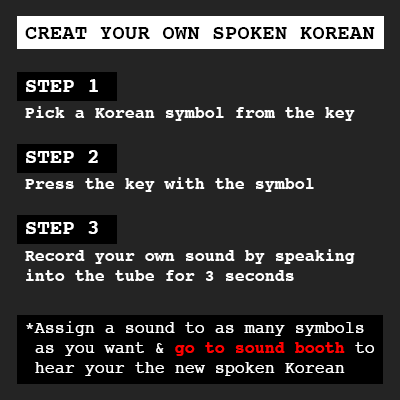
<style>
.page{position:relative;width:400px;height:400px;background:#242424}
.page>*{position:absolute;margin:0}
.t1{font:20.8px "Courier-Bold";color:#000000}
.t2{font:16.7px "Courier-Bold";color:#ffffff}
.t3{font:20.8px "Courier-Bold";color:#ffffff}
.t4{font:16.7px "Courier";color:#ffffff}
.t5{font:16.7px "Courier-Bold";color:#ff0000}
</style>
<div class="page">
<p class="t1" style="left:25px;top:27px;width:350px;height:12px">CREAT YOUR OWN SPOKEN KOREAN</p>
<p class="t2" style="left:25px;top:79px;width:349px;height:297px"><span class="t3">STEP 1<br></span>Pick a Korean symbol from the key<br><br><span class="t3">STEP 2<br></span>Press the key with the symbol<br><br><span class="t3">STEP 3<br></span>Record your own sound by speaking into the tube for 3 seconds<br><br><span class="t4">*Assign a sound to as many symbols <br> as you want &amp; </span><span class="t5">go to sound booth</span><span class="t4"> to<br> hear your the new spoken Korean</span></p>
</div>
